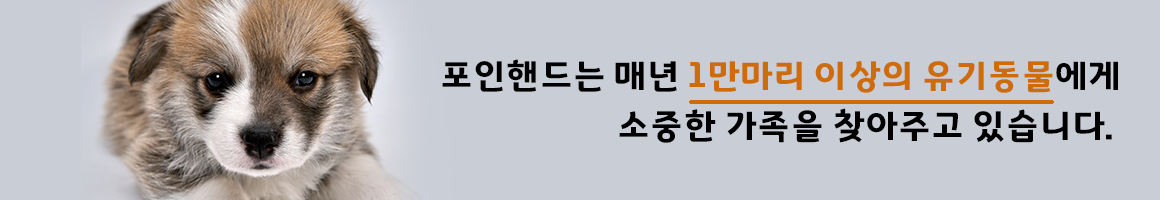
<style>
.page{position:relative;width:1160px;height:200px;background:#c9cdd6}
.page>*{position:absolute;margin:0}
.t1{font:35px/50px "GyeonggiTitleVOTF";letter-spacing:-0.05em;color:#000000}
.t2{font:35px/50px "GyeonggiTitleVOTF";letter-spacing:-0.05em;color:#ce6c0a}
</style>
<div class="page">
<p class="t1" style="left:442px;top:59px;width:676px;height:84px;text-align:right">포인핸드는 매년 <span class="t2">1만마리 이상의 유기동물</span>에게<br>소중한 가족을 찾아주고 있습니다.</p>
</div>
